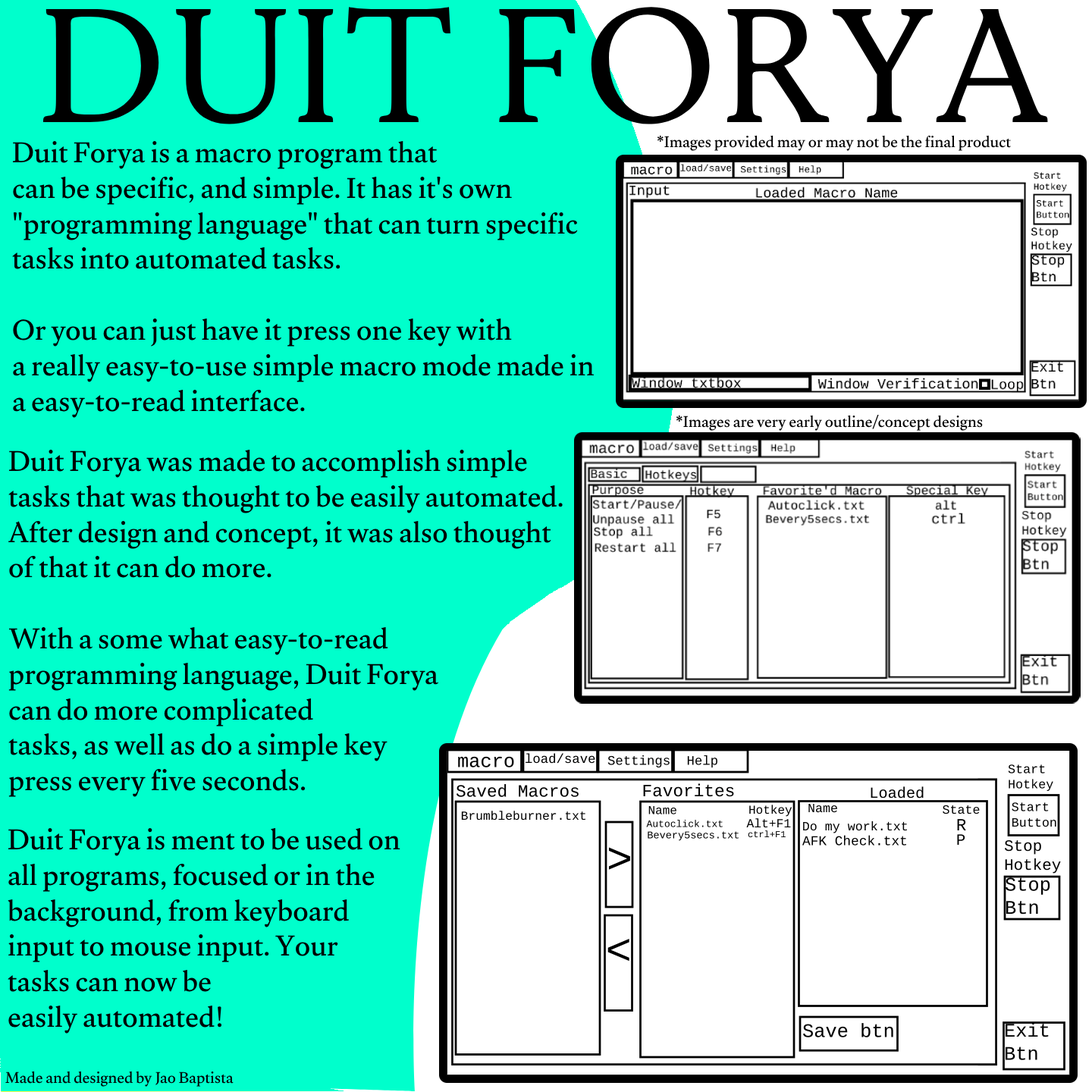
<style>
.page{position:relative;width:1092px;height:1092px;background:#ffffff}
.page>*{position:absolute;margin:0}
.t1{font:16px "Gulzar-Regular";color:#000000}
.t2{font:29.6px "Gulzar-Regular";color:#000000}
</style>
<div class="page">
<p class="t1" style="left:657px;top:135px;width:354px;height:16px">*Images provided may or may not be the final product</p>
<p class="t2" style="left:12px;top:140px;width:582px;height:278px">Duit Forya is a macro program that<br>can be specific, and simple. It has it's own <br>"programming language" that can turn specific<br>tasks into automated tasks.<br><br>Or you can just have it press one key with<br>a really easy-to-use simple macro mode made in<br>a easy-to-read interface.</p>
<p class="t1" style="left:676px;top:414px;width:307px;height:17px">*Images are very early outline/concept designs</p>
<p class="t2" style="left:8px;top:449px;width:555px;height:348px">Duit Forya was made to accomplish simple<br>tasks that was thought to be easily automated.<br>After design and concept, it was also thought<br>of that it can do more. <br><br>With a some what easy-to-read <br>programming language, Duit Forya <br>can do more complicated<br>tasks, as well as do a simple key <br>press every five seconds.</p>
<p class="t2" style="left:8px;top:827px;width:392px;height:207px">Duit Forya is ment to be used on<br>all programs, focused or in the <br>background, from keyboard <br>input to mouse input. Your <br>tasks can now be <br>easily automated!</p>
<p class="t1" style="left:5px;top:1071px;width:229px;height:16px">Made and designed by Jao Baptista</p>
</div>
